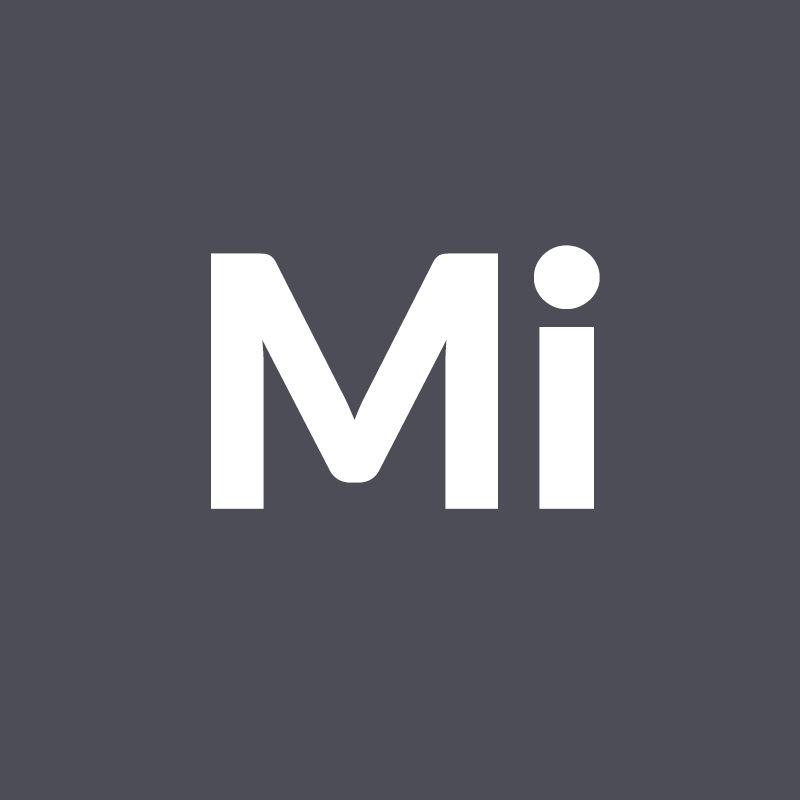
<style>
.page{position:relative;width:800px;height:800px;background:#4c4d57}
.page>*{position:absolute;margin:0}
.t1{font:350px "Lato-Black";color:#ffffff}
</style>
<div class="page">
<p class="t1" style="left:211px;top:245px;width:389px;height:264px">Mi</p>
</div>
